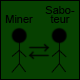
<style>
.page{position:relative;width:80px;height:80px;background:#064000}
.page>*{position:absolute;margin:0}
.t1{font:10.9px/8.3px "ArialMT";color:#000400}
.t2{font:10.9px "ArialMT";color:#000400}
</style>
<div class="page">
<p class="t1" style="left:45px;top:6px;width:30px;height:17px;text-align:center">Sabo-<br>teur</p>
<p class="t2" style="left:5px;top:15px;width:28px;height:8px">Miner</p>
</div>
